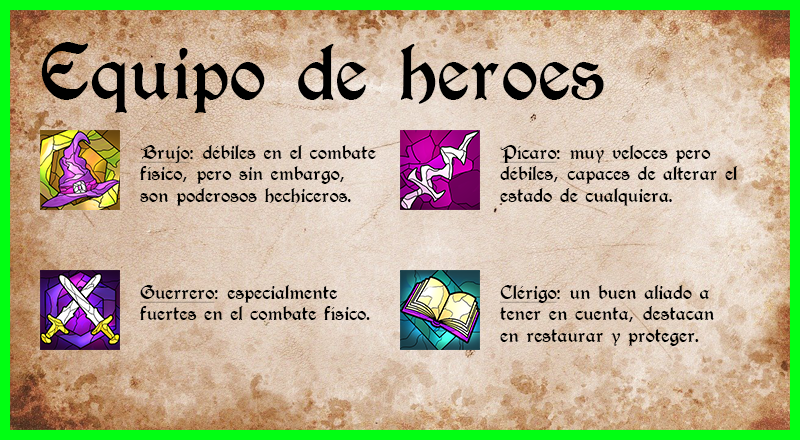
<style>
.page{position:relative;width:800px;height:440px}
.page>*{position:absolute;margin:0}
.t1{font:72px "T4C-Beaulieux";color:#000000}
.t2{font:18px "T4C-Beaulieux";color:#000000}
.t3{font:18px "T4C-Beaulieux";color:#000000;text-decoration:underline}
</style>
<div class="page">
<p class="t1" style="left:41px;top:42px;width:563px;height:71px">Equipo de heroes</p>
<p class="t2" style="left:140px;top:145px;width:236px;height:61px"><span class="t3">Brujo</span>: débiles en el combate físico, pero sin embargo, son poderosos hechiceros.</p>
<p class="t2" style="left:500px;top:145px;width:237px;height:61px"><span class="t3">Pícaro</span>: muy veloces pero débiles, capaces de alterar el estado de cualquiera.</p>
<p class="t2" style="left:140px;top:285px;width:230px;height:35px"><span class="t3">Guerrero</span>: especialmente fuertes en el combate físico.</p>
<p class="t2" style="left:500px;top:285px;width:214px;height:61px"><span class="t3">Clérigo</span>: un buen aliado a tener en cuenta, destacan en restaurar y proteger.</p>
</div>
